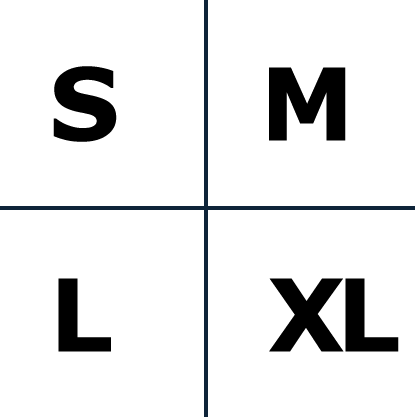
<style>
.page{position:relative;width:417px;height:417px;background:#ffffff}
.page>*{position:absolute;margin:0}
.t1{font:100px "Verdana-Bold";letter-spacing:-0.08em;color:#000000}
</style>
<div class="page">
<p class="t1" style="left:53px;top:66px;width:64px;height:76px">S</p>
<p class="t1" style="left:269px;top:67px;width:77px;height:74px">M</p>
<p class="t1" style="left:58px;top:278px;width:53px;height:74px">L</p>
<p class="t1" style="left:269px;top:278px;width:130px;height:74px">XL</p>
</div>
